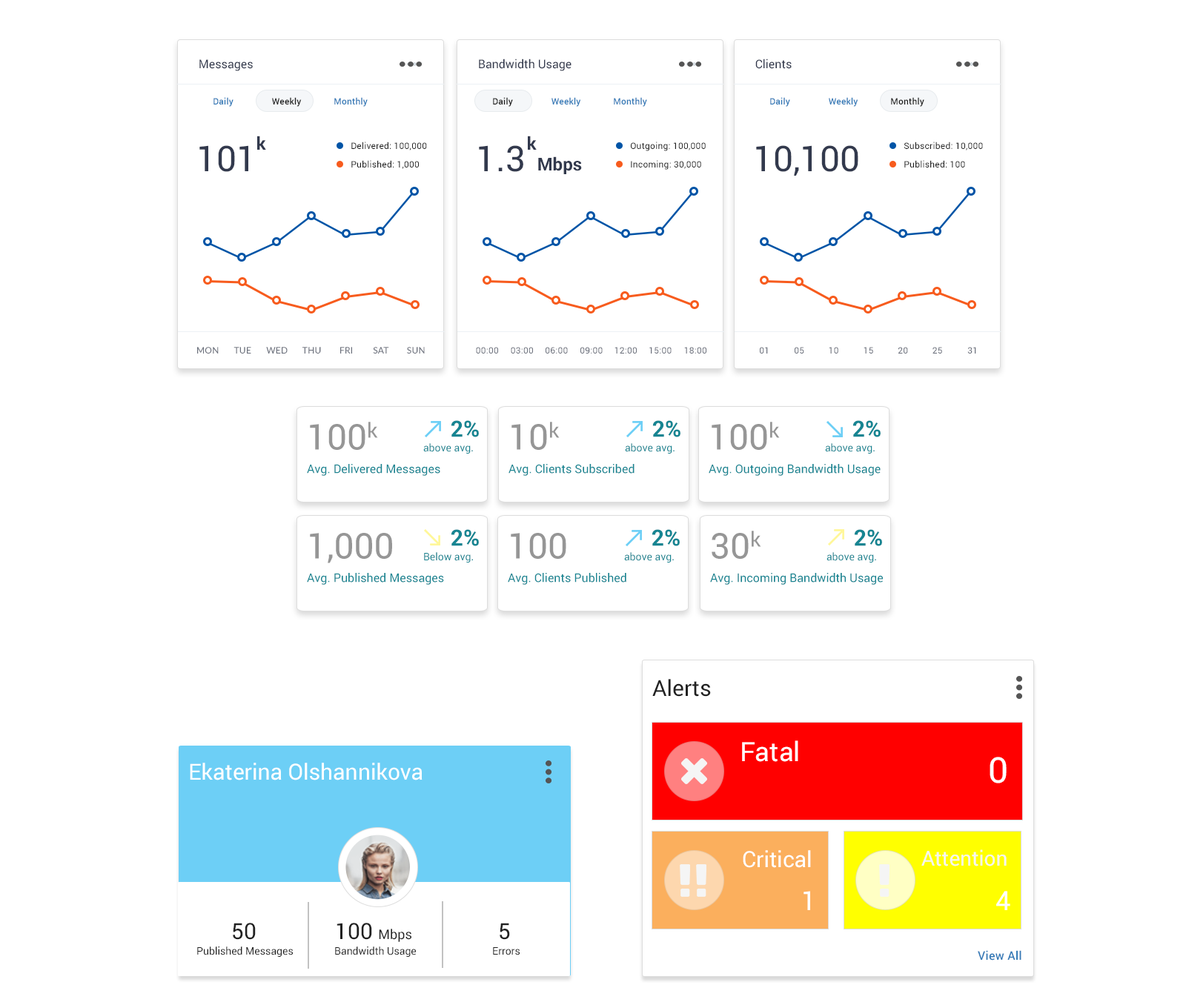
<style>
.page{position:relative;width:1186px;height:1005px;background:#ffffff}
.page>*{position:absolute;margin:0}
.t1{font:11.9px "Roboto-Regular";color:#32394d}
.t2{font:8.9px "Roboto-Medium";letter-spacing:0.02em;color:#337ab7}
.t3{font:8.9px "Roboto-Medium";letter-spacing:0.02em;color:#212121}
.t4{font:17.8px "Roboto-Bold";color:#32394d}
.t5{font:35.6px "Roboto-Regular";color:#32394d}
.t6{font:8.9px "Roboto-Regular";letter-spacing:0.02em;color:#212121}
.t7{font:8.9px "Lato-Medium";letter-spacing:0.02em;color:#6a6f7b;text-transform:uppercase}
.t8{font:8.9px "Roboto-Regular";letter-spacing:0.02em;color:#6a6f7b;text-transform:uppercase}
.t9{font:35.6px "Roboto-Regular";color:#969696}
.t10{font:22.2px "Roboto-Bold";color:#168592}
.t11{font:10.4px "Roboto-Regular";color:#168592}
.t12{font:11.9px "Roboto-Regular";color:#168592}
.t13{font:22.2px "Roboto-Regular";color:#212121}
.t14{font:26.7px "Roboto-Regular";color:#ffffff}
.t15{font:35.6px "Roboto-Regular";color:#ffffff}
.t16{font:22.2px "Roboto-Regular";color:#ffffff}
.t17{font:20.8px "Roboto-Regular";color:#f5f5f5}
.t18{font:13.3px "Roboto-Regular";color:#212121}
.t19{font:10.4px "Roboto-Regular";color:#212121}
.t20{font:11.9px "Roboto-Medium";letter-spacing:0.02em;color:#337ab7}
</style>
<div class="page">
<p class="t1" style="left:199px;top:59px;width:54px;height:12px">Messages</p>
<p class="t1" style="left:479px;top:59px;width:93px;height:12px">Bandwidth Usage</p>
<p class="t1" style="left:755px;top:59px;width:37px;height:10px">Clients</p>
<p class="t2" style="left:214px;top:97px;width:20px;height:10px">Daily</p>
<p class="t3" style="left:272px;top:97px;width:30px;height:10px">Weekly</p>
<p class="t2" style="left:334px;top:97px;width:34px;height:10px">Monthly</p>
<p class="t3" style="left:493px;top:97px;width:20px;height:10px">Daily</p>
<p class="t2" style="left:552px;top:97px;width:29px;height:10px">Weekly</p>
<p class="t2" style="left:614px;top:97px;width:33px;height:10px">Monthly</p>
<p class="t2" style="left:770px;top:97px;width:20px;height:10px">Daily</p>
<p class="t2" style="left:829px;top:97px;width:29px;height:10px">Weekly</p>
<p class="t3" style="left:891px;top:97px;width:33px;height:10px">Monthly</p>
<p class="t4" style="left:257px;top:136px;width:9px;height:14px">k</p>
<p class="t4" style="left:528px;top:136px;width:9px;height:14px">k</p>
<p class="t5" style="left:199px;top:145px;width:49px;height:27px">101</p>
<p class="t6" style="left:351px;top:142px;width:76px;height:8px">Delivered: 100,000</p>
<p class="t5" style="left:479px;top:145px;width:44px;height:27px">1.3</p>
<p class="t6" style="left:631px;top:142px;width:75px;height:9px">Outgoing: 100,000</p>
<p class="t5" style="left:756px;top:145px;width:102px;height:31px">10,100</p>
<p class="t6" style="left:904px;top:142px;width:79px;height:8px">Subscribed: 10,000</p>
<p class="t6" style="left:351px;top:160px;width:68px;height:9px">Published: 1,000</p>
<p class="t4" style="left:538px;top:156px;width:44px;height:18px">Mbps</p>
<p class="t6" style="left:631px;top:160px;width:70px;height:10px">Incoming: 30,000</p>
<p class="t6" style="left:904px;top:160px;width:61px;height:8px">Published: 100</p>
<p class="t7" style="left:197px;top:347px;width:22px;height:7px">Mon</p>
<p class="t7" style="left:234px;top:347px;width:17px;height:7px">Tue</p>
<p class="t7" style="left:266px;top:347px;width:22px;height:7px">Wed</p>
<p class="t7" style="left:302px;top:347px;width:19px;height:7px">Thu</p>
<p class="t7" style="left:340px;top:347px;width:12px;height:7px">Fri</p>
<p class="t7" style="left:373px;top:347px;width:16px;height:7px">Sat</p>
<p class="t7" style="left:407px;top:347px;width:18px;height:7px">Sun</p>
<p class="t8" style="left:476px;top:347px;width:22px;height:7px">00:00</p>
<p class="t8" style="left:511px;top:347px;width:22px;height:7px">03:00</p>
<p class="t8" style="left:546px;top:347px;width:22px;height:7px">06:00</p>
<p class="t8" style="left:580px;top:347px;width:23px;height:7px">09:00</p>
<p class="t8" style="left:615px;top:347px;width:22px;height:7px">12:00</p>
<p class="t8" style="left:649px;top:347px;width:23px;height:7px">15:00</p>
<p class="t8" style="left:684px;top:347px;width:23px;height:7px">18:00</p>
<p class="t8" style="left:760px;top:347px;width:8px;height:7px">01</p>
<p class="t8" style="left:795px;top:347px;width:9px;height:7px">05</p>
<p class="t8" style="left:829px;top:347px;width:9px;height:7px">10</p>
<p class="t8" style="left:864px;top:347px;width:9px;height:7px">15</p>
<p class="t8" style="left:898px;top:347px;width:10px;height:7px">20</p>
<p class="t8" style="left:933px;top:347px;width:9px;height:7px">25</p>
<p class="t8" style="left:967px;top:347px;width:9px;height:7px">31</p>
<p class="t9" style="left:310px;top:422px;width:68px;height:28px">100k</p>
<p class="t10" style="left:451px;top:420px;width:28px;height:17px">2%</p>
<p class="t9" style="left:512px;top:422px;width:48px;height:28px">10k</p>
<p class="t10" style="left:652px;top:420px;width:29px;height:17px">2%</p>
<p class="t9" style="left:712px;top:422px;width:68px;height:28px">100k</p>
<p class="t10" style="left:853px;top:420px;width:28px;height:17px">2%</p>
<p class="t11" style="left:423px;top:443px;width:50px;height:11px">above avg.</p>
<p class="t11" style="left:625px;top:443px;width:50px;height:11px">above avg.</p>
<p class="t11" style="left:825px;top:443px;width:50px;height:11px">above avg.</p>
<p class="t12" style="left:307px;top:464px;width:133px;height:12px">Avg. Delivered Messages</p>
<p class="t12" style="left:509px;top:464px;width:126px;height:12px">Avg. Clients Subscribed</p>
<p class="t12" style="left:709px;top:464px;width:172px;height:12px">Avg. Outgoing Bandwidth Usage</p>
<p class="t9" style="left:310px;top:533px;width:82px;height:30px">1,000</p>
<p class="t10" style="left:451px;top:529px;width:28px;height:17px">2%</p>
<p class="t9" style="left:511px;top:533px;width:55px;height:26px">100</p>
<p class="t10" style="left:652px;top:529px;width:28px;height:17px">2%</p>
<p class="t9" style="left:712px;top:531px;width:49px;height:28px">30k</p>
<p class="t10" style="left:854px;top:529px;width:28px;height:17px">2%</p>
<p class="t11" style="left:424px;top:552px;width:49px;height:11px">Below avg.</p>
<p class="t11" style="left:624px;top:552px;width:50px;height:11px">above avg.</p>
<p class="t11" style="left:827px;top:552px;width:49px;height:11px">above avg.</p>
<p class="t12" style="left:307px;top:573px;width:137px;height:12px">Avg. Published Messages</p>
<p class="t12" style="left:508px;top:573px;width:118px;height:12px">Avg. Clients Published</p>
<p class="t12" style="left:710px;top:573px;width:173px;height:12px">Avg. Incoming Bandwidth Usage</p>
<p class="t13" style="left:652px;top:679px;width:59px;height:18px">Alerts</p>
<p class="t14" style="left:742px;top:741px;width:56px;height:21px">Fatal</p>
<p class="t15" style="left:990px;top:757px;width:17px;height:27px">0</p>
<p class="t16" style="left:190px;top:763px;width:233px;height:18px">Ekaterina Olshannikova</p>
<p class="t16" style="left:743px;top:850px;width:68px;height:18px">Critical</p>
<p class="t17" style="left:922px;top:850px;width:85px;height:17px">Attention</p>
<p class="t14" style="left:804px;top:891px;width:6px;height:19px">1</p>
<p class="t14" style="left:996px;top:891px;width:14px;height:19px">4</p>
<p class="t13" style="left:233px;top:923px;width:23px;height:17px">50</p>
<p class="t18" style="left:337px;top:923px;width:74px;height:19px"><span class="t13">100 </span>Mbps</p>
<p class="t13" style="left:500px;top:923px;width:10px;height:17px">5</p>
<p class="t19" style="left:197px;top:947px;width:97px;height:10px">Published Messages</p>
<p class="t19" style="left:335px;top:947px;width:81px;height:10px">Bandwidth Usage</p>
<p class="t19" style="left:493px;top:947px;width:27px;height:9px">Errors</p>
<p class="t20" style="left:978px;top:950px;width:44px;height:11px">View All</p>
</div>
